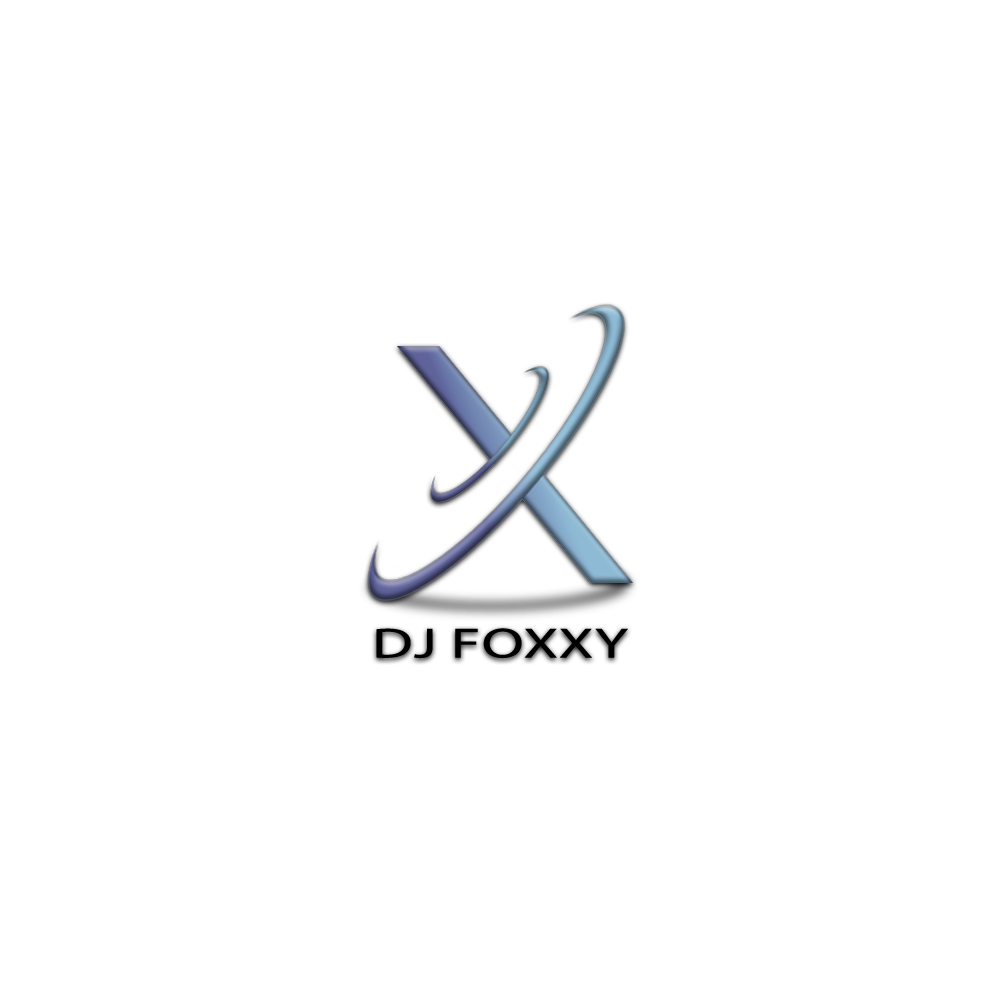
<style>
.page{position:relative;width:1000px;height:1000px;background:#ffffff}
.page>*{position:absolute;margin:0}
.t1{font:42.5px "MyriadPro-Regular";color:#000000;text-transform:uppercase;scale:1.44 1}
</style>
<div class="page">
<p class="t1" style="left:376px;top:628px;width:252px;height:31px">DJ Foxxy</p>
</div>
